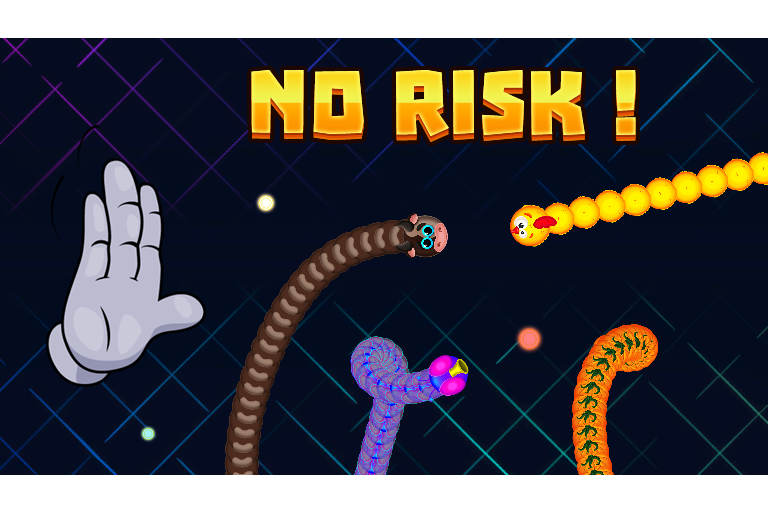
<style>
.page{position:relative;width:768px;height:512px;background:#050c21}
.page>*{position:absolute;margin:0}
.t1{font:101.3px "Troika"}
</style>
<div class="page">
<p class="t1" style="left:251px;top:70px;width:385px;height:66px">NO Risk !</p>
</div>
